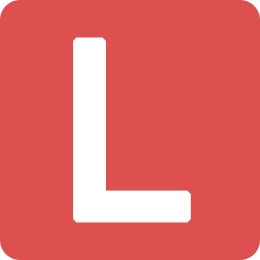
<style>
.page{position:relative;width:260px;height:260px;background:#dc5050}
.page>*{position:absolute;margin:0}
.t1{font:250px "DINAlternate-Bold";color:#ffffff;font-weight:bold}
</style>
<div class="page">
<p class="t1" style="left:73px;top:37px;width:118px;height:186px">L</p>
</div>
